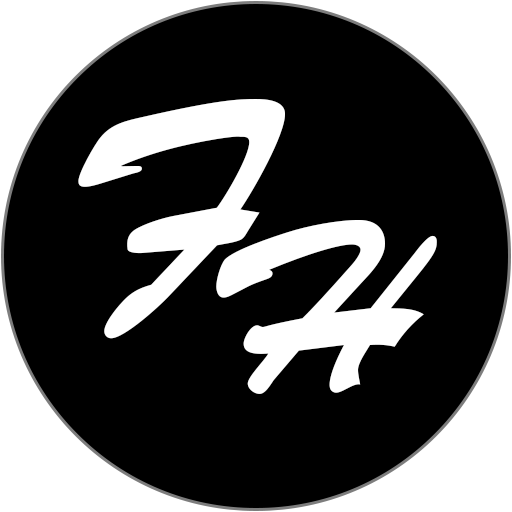
<style>
.page{position:relative;width:512px;height:512px;background:#000000}
.page>*{position:absolute;margin:0}
.t1{font:284.2px "BrushScriptStd";color:#ffffff}
.t2{font:241.9px "BrushScriptStd";color:#ffffff}
</style>
<div class="page">
<p class="t1" style="left:78px;top:99px;width:207px;height:240px">F</p>
<p class="t2" style="left:216px;top:220px;width:221px;height:174px">H</p>
</div>
